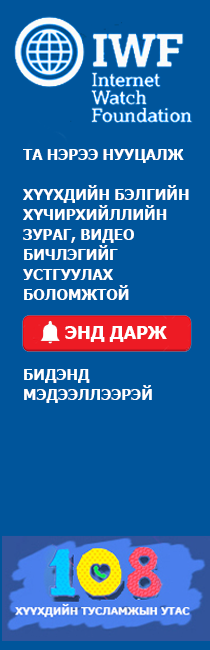
<style>
.page{position:relative;width:210px;height:650px;background:#00559b}
.page>*{position:absolute;margin:0}
.t1{font:15px/20px "Tahoma-Bold";color:#ffffff;text-transform:uppercase}
.t2{font:18px "Tahoma-Bold";color:#ffffff}
</style>
<div class="page">
<p class="t1" style="left:23px;top:149px;width:166px;height:254px">Та нэрээ нууцалж<br><br>Хүүхдийн бэлгийн хүчирхийллийн <br>зураг, видео бичлэгийг устгуулах боломжтой <br><br><br><br>Бидэнд мэдээллээрэй</p>
<p class="t2" style="left:65px;top:326px;width:102px;height:16px">ЭНД ДАРЖ</p>
</div>
